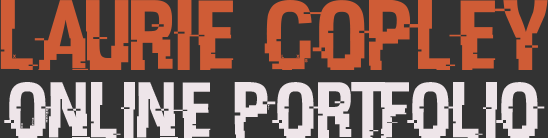
<style>
.page{position:relative;width:548px;height:138px;background:#333333}
.page>*{position:absolute;margin:0}
.t1{font:100px "HACKED";color:#cf5c36}
.t2{font:80px "HACKED";color:#eee5e9}
</style>
<div class="page">
<p class="t1" style="left:0px;top:0px;width:548px;height:70px">Laurie Copley</p>
<p class="t2" style="left:4px;top:82px;width:541px;height:56px">Online Portfolio</p>
</div>
